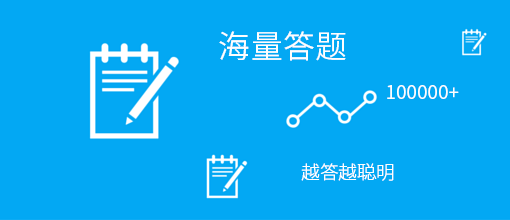
<style>
.page{position:relative;width:510px;height:220px;background:#03a8f3}
.page>*{position:absolute;margin:0}
.t1{font:32px "SourceHanSansCN-Normal";letter-spacing:0.01em;color:#fefefe}
.t2{font:18.7px "SourceHanSansCN-Normal";letter-spacing:0.01em;color:#fefefe}
.t3{font:18.7px "SourceHanSansCN-Light";letter-spacing:0.01em;color:#fefefe}
</style>
<div class="page">
<p class="t1" style="left:219px;top:31px;width:127px;height:30px">海量答题</p>
<p class="t2" style="left:387px;top:85px;width:72px;height:14px">100000+</p>
<p class="t3" style="left:301px;top:163px;width:93px;height:18px">越答越聪明</p>
</div>
